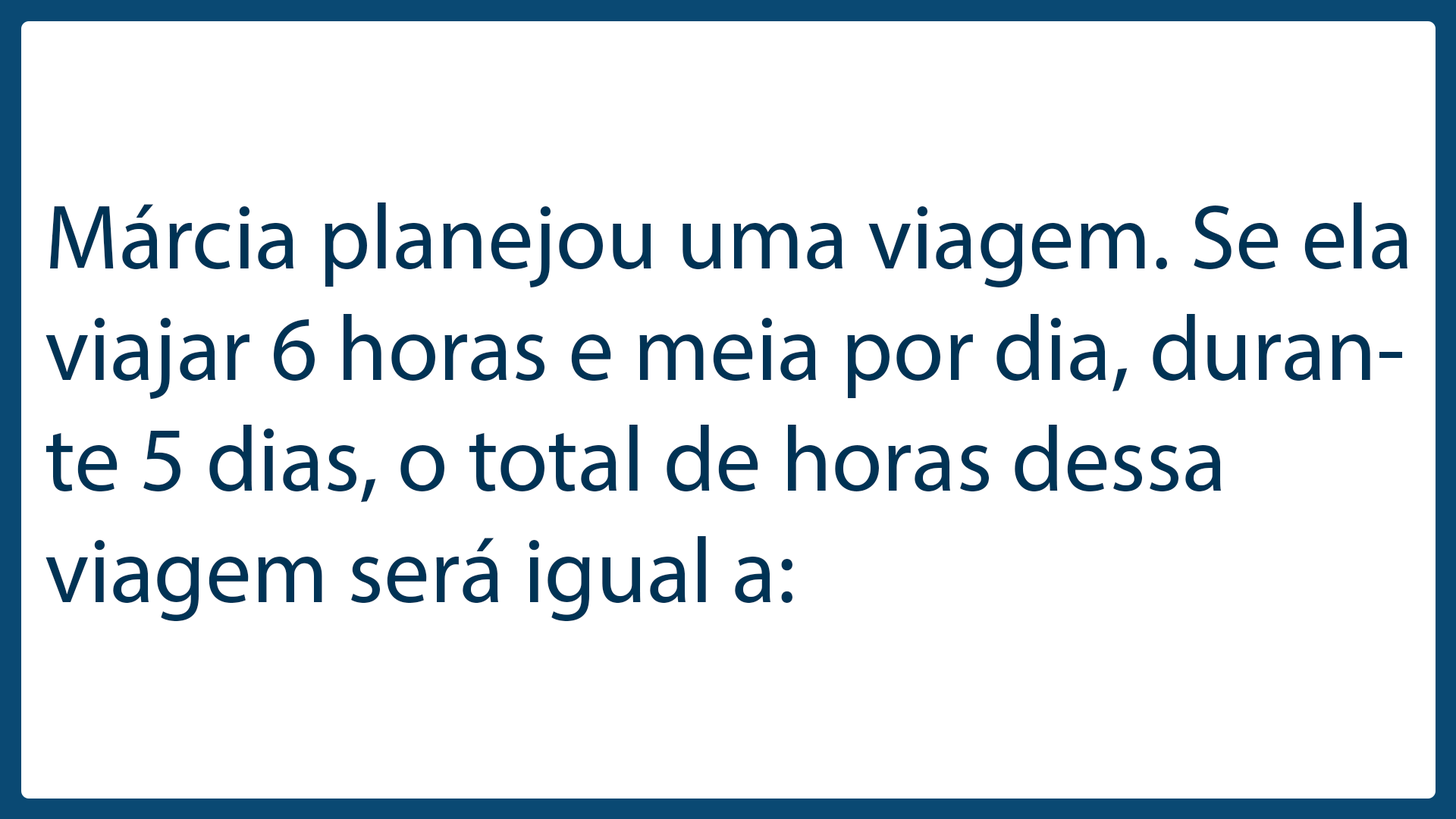
<style>
.page{position:relative;width:1456px;height:819px;background:#ffffff}
.page>*{position:absolute;margin:0}
.t1{font:92.6px "MyriadPro-Regular";color:#003355}
</style>
<div class="page">
<p class="t1" style="left:45px;top:202px;width:1362px;height:420px">Márcia planejou uma viagem. Se ela viajar 6 horas e meia por dia, durante 5 dias, o total de horas dessa viagem será igual a:</p>
</div>
